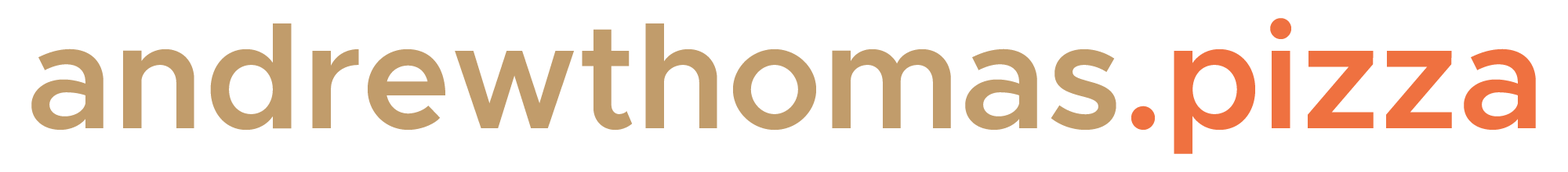
<style>
.page{position:relative;width:1568px;height:172px;background:#ffffff}
.page>*{position:absolute;margin:0}
.t1{font:150.3px "Metropolis-SemiBold";color:#c19c6b}
.t2{font:150.3px "Metropolis-SemiBold";color:#ef7140}
</style>
<div class="page">
<p class="t1" style="left:31px;top:18px;width:1505px;height:136px">andrewthomas<span class="t2">.pizza</span></p>
</div>
